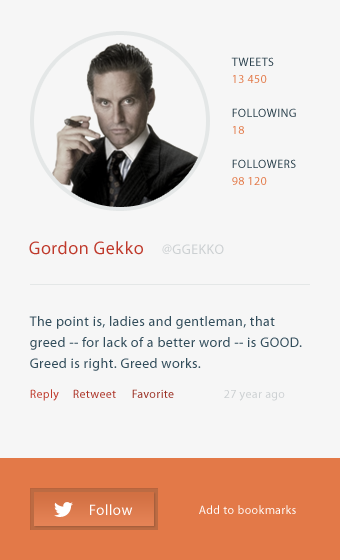
<style>
.page{position:relative;width:340px;height:560px;background:#f6f6f6}
.page>*{position:absolute;margin:0}
.t1{font:12px/17px "MyriadPro-Regular";letter-spacing:0.03em;color:#2b414d;text-transform:uppercase}
.t2{font:12px/17px "MyriadPro-Regular";letter-spacing:0.03em;color:#e37948;text-transform:uppercase}
.t3{font:18px "MyriadPro-Regular";letter-spacing:0.03em;color:#bf392b}
.t4{font:14px "MyriadPro-Regular";letter-spacing:0.03em;color:#ccd0d2;text-transform:uppercase}
.t5{font:14px/21px "MyriadPro-Regular";letter-spacing:0.03em;color:#324d5b}
.t6{font:12px "MyriadPro-Regular";letter-spacing:0.03em;color:#bf392b}
.t7{font:12px "MyriadPro-Regular";letter-spacing:0.03em;color:#992e22}
.t8{font:12px "MyriadPro-Regular";letter-spacing:0.03em;color:#ccd0d2}
.t9{font:15px "MyriadPro-Regular";letter-spacing:0.03em;color:#ffffff}
.t10{font:12px "MyriadPro-Regular";letter-spacing:0.03em;color:#ffffff}
</style>
<div class="page">
<p class="t1" style="left:231px;top:57px;width:43px;height:26px">tweets<br><span class="t2">13 450</span></p>
<p class="t1" style="left:232px;top:108px;width:64px;height:26px">Following<br><span class="t2">18</span></p>
<p class="t1" style="left:232px;top:159px;width:64px;height:26px">Followers<br><span class="t2">98 120</span></p>
<p class="t3" style="left:29px;top:241px;width:114px;height:14px">Gordon Gekko</p>
<p class="t4" style="left:162px;top:244px;width:62px;height:10px">@ggekko</p>
<p class="t5" style="left:29px;top:316px;width:273px;height:55px">The point is, ladies and gentleman, that greed -- for lack of a better word -- is GOOD. Greed is right. Greed works.</p>
<p class="t6" style="left:30px;top:389px;width:29px;height:12px">Reply</p>
<p class="t6" style="left:73px;top:389px;width:43px;height:9px">Retweet</p>
<p class="t7" style="left:132px;top:389px;width:42px;height:9px">Favorite</p>
<p class="t8" style="left:224px;top:390px;width:61px;height:11px">27 year ago</p>
<p class="t9" style="left:90px;top:504px;width:43px;height:11px">Follow</p>
<p class="t10" style="left:199px;top:505px;width:97px;height:9px">Add to bookmarks</p>
</div>
